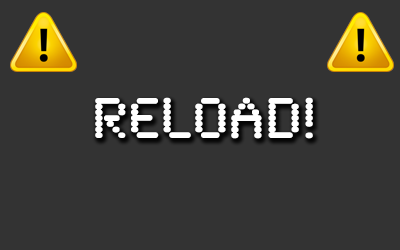
<style>
.page{position:relative;width:400px;height:250px;background:#333333}
.page>*{position:absolute;margin:0}
.t1{font:60px "SynchroLET";color:#ffffff}
</style>
<div class="page">
<p class="t1" style="left:95px;top:97px;width:218px;height:42px">RELOAD!</p>
</div>
